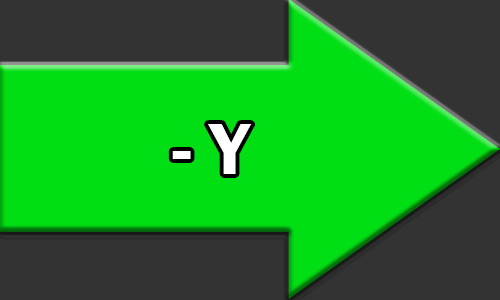
<style>
.page{position:relative;width:500px;height:300px;background:#00df14}
.page>*{position:absolute;margin:0}
.t1{font:75px "FranklinGothic-Demi";color:#ffffff}
</style>
<div class="page">
<p class="t1" style="left:172px;top:124px;width:80px;height:50px">- Y</p>
</div>
